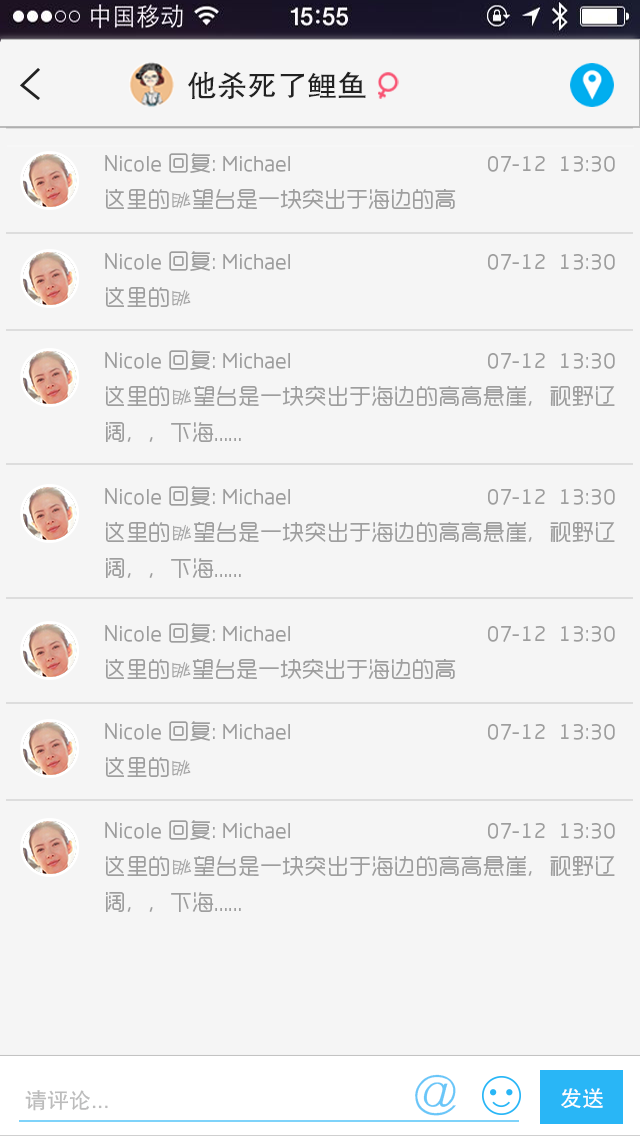
<style>
.page{position:relative;width:640px;height:1136px;background:#f5f5f5}
.page>*{position:absolute;margin:0}
.t1{font:30px "FZHTJW--GB1-0";color:#212121}
.t2{font:22px/36px "RTWSYueGoDemo-Regular";color:#9e9e9e}
.t3{font:22px/36px "HYg3gj";color:#9e9e9e}
.t4{font:46px "HYi3gj";color:#69c6f8}
.t5{font:22px "FZHTJW--GB1-0";color:#bcbcbc}
.t6{font:22px "FZHTJW--GB1-0";color:#ffffff}
</style>
<div class="page">
<p class="t1" style="left:188px;top:71px;width:178px;height:28px">他杀死了鲤鱼</p>
<p class="t2" style="left:105px;top:153px;width:510px;height:56px;text-align:justify">Nicole 回复: Michael                                  07-12  13:30<br>这里的<span class="t3">眺</span>望台是一块突出于海边的高</p>
<p class="t2" style="left:105px;top:251px;width:510px;height:56px;text-align:justify">Nicole 回复: Michael                                  07-12  13:30<br>这里的<span class="t3">眺</span></p>
<p class="t2" style="left:105px;top:350px;width:510px;height:92px;text-align:justify">Nicole 回复: Michael                                  07-12  13:30<br>这里的<span class="t3">眺</span>望台是一块突出于海边的高高悬崖，视野辽阔，，下海......</p>
<p class="t2" style="left:105px;top:486px;width:510px;height:92px;text-align:justify">Nicole 回复: Michael                                  07-12  13:30<br>这里的<span class="t3">眺</span>望台是一块突出于海边的高高悬崖，视野辽阔，，下海......</p>
<p class="t2" style="left:105px;top:623px;width:510px;height:56px;text-align:justify">Nicole 回复: Michael                                  07-12  13:30<br>这里的<span class="t3">眺</span>望台是一块突出于海边的高</p>
<p class="t2" style="left:105px;top:721px;width:510px;height:56px;text-align:justify">Nicole 回复: Michael                                  07-12  13:30<br>这里的<span class="t3">眺</span></p>
<p class="t2" style="left:105px;top:820px;width:510px;height:92px;text-align:justify">Nicole 回复: Michael                                  07-12  13:30<br>这里的<span class="t3">眺</span>望台是一块突出于海边的高高悬崖，视野辽阔，，下海......</p>
<p class="t4" style="left:415px;top:1074px;width:41px;height:42px">@</p>
<p class="t5" style="left:25px;top:1090px;width:83px;height:21px">请评论...</p>
<p class="t6" style="left:561px;top:1088px;width:42px;height:20px">发送</p>
</div>
